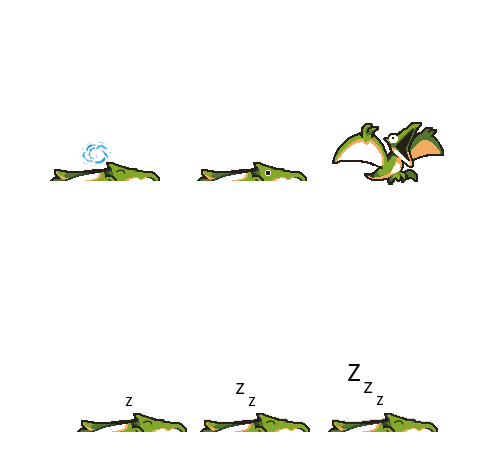
<style>
.page{position:relative;width:504px;height:452px;background:#ffffff}
.page>*{position:absolute;margin:0}
.t1{font:24px "MyriadPro-Regular";color:#000000}
.t2{font:16px "MyriadPro-Regular";color:#000000}
.t3{font:16.1px "MyriadPro-Regular";color:#000000}
.t4{font:12px "MyriadPro-Regular";color:#000000}
.t5{font:12.1px "MyriadPro-Regular";color:#000000}
.t6{font:12.2px "MyriadPro-Regular";color:#000000}
</style>
<div class="page">
<p class="t1" style="left:348px;top:364px;width:12px;height:17px">Z</p>
<p class="t2" style="left:236px;top:383px;width:9px;height:11px">Z</p>
<p class="t3" style="left:364px;top:382px;width:9px;height:11px">Z</p>
<p class="t4" style="left:125px;top:397px;width:7px;height:9px">Z</p>
<p class="t5" style="left:248px;top:397px;width:7px;height:9px">Z</p>
<p class="t6" style="left:376px;top:396px;width:7px;height:9px">Z</p>
</div>
